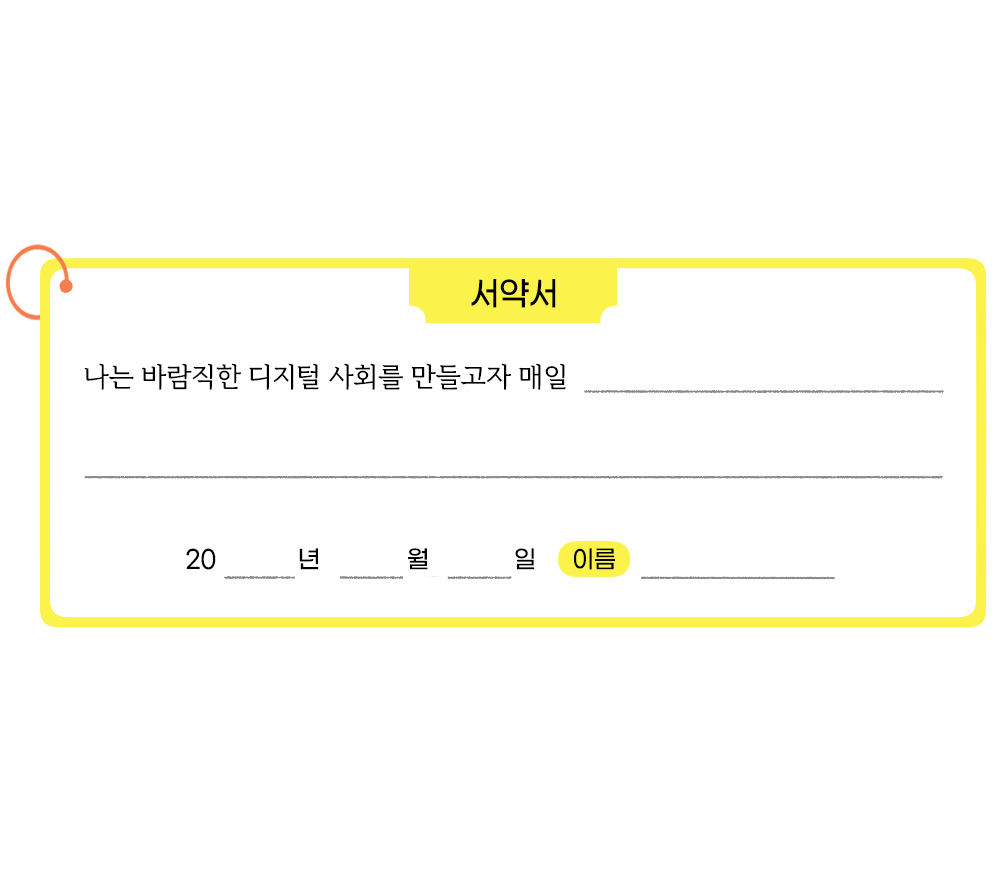
<style>
.page{position:relative;width:1000px;height:880px;background:#ffffff}
.page>*{position:absolute;margin:0}
.t1{font:33.3px "GmarketSansTTFMedium";letter-spacing:-0.02em;color:#000000;scale:0.94 1}
.t2{font:27.1px "RIDIBatang";letter-spacing:-0.02em;color:#000000}
.t3{font:25px "GmarketSansTTFMedium";letter-spacing:-0.02em;color:#000000;scale:0.94 1}
</style>
<div class="page">
<p class="t1" style="left:471px;top:279px;width:85px;height:29px">서약서</p>
<p class="t2" style="left:84px;top:363px;width:482px;height:27px">나는 바람직한 디지털 사회를 만들고자 매일</p>
<p class="t3" style="left:186px;top:548px;width:30px;height:22px">20</p>
<p class="t3" style="left:299px;top:548px;width:20px;height:22px">년</p>
<p class="t3" style="left:408px;top:548px;width:20px;height:22px">월</p>
<p class="t3" style="left:515px;top:548px;width:20px;height:22px">일</p>
<p class="t3" style="left:574px;top:548px;width:41px;height:22px">이름</p>
</div>
